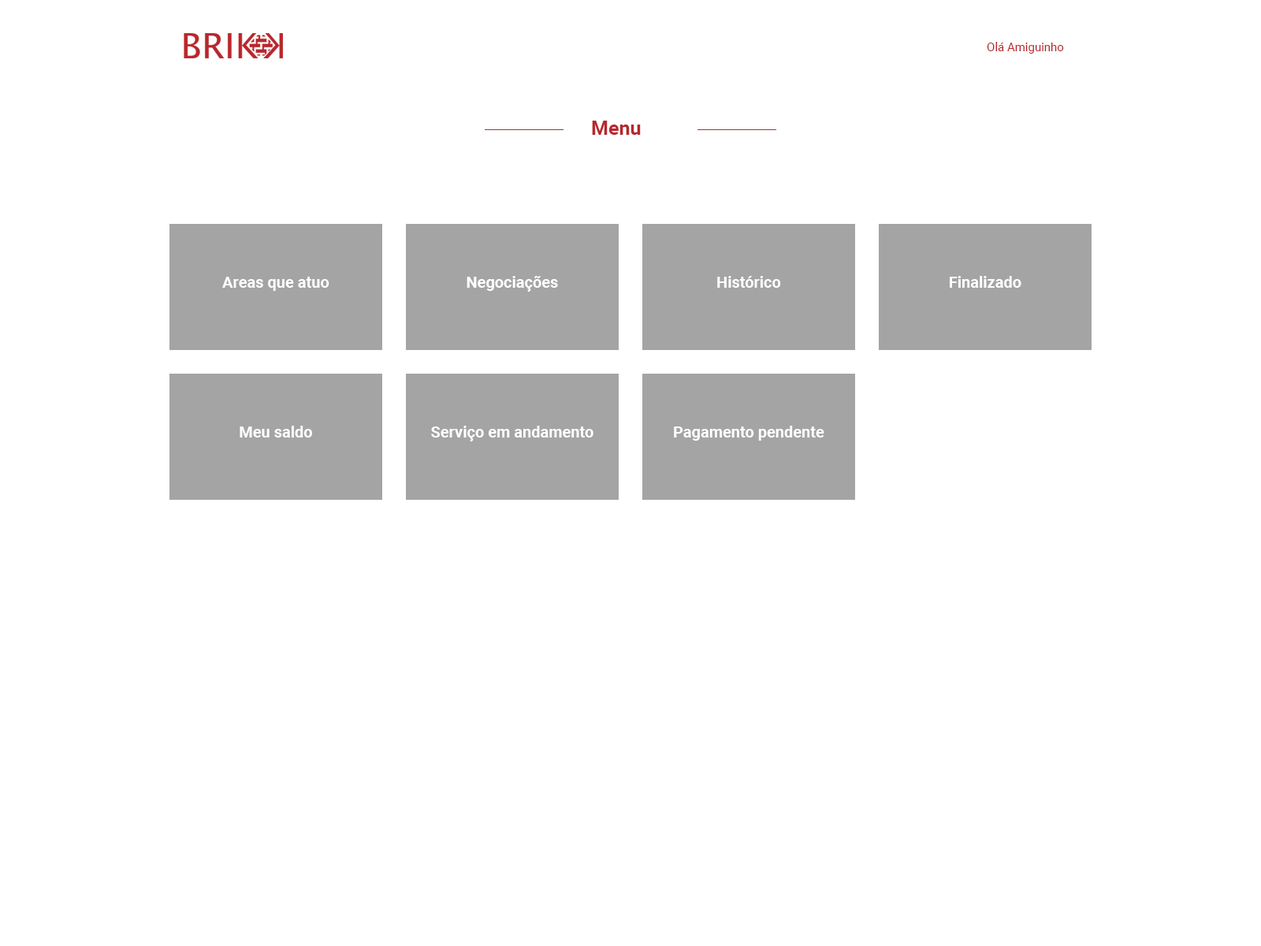
<style>
.page{position:relative;width:1261px;height:946px;background:#ffffff}
.page>*{position:absolute;margin:0}
.t1{font:11.8px "Roboto-Regular";color:#b8272c}
.t2{font:19.7px "Roboto-Bold";color:#b8272c}
.t3{font:15.8px "Roboto-Bold";color:#ffffff}
</style>
<div class="page">
<p class="t1" style="left:987px;top:42px;width:77px;height:12px">Olá Amiguinho</p>
<p class="t2" style="left:592px;top:121px;width:49px;height:14px">Menu</p>
<p class="t3" style="left:222px;top:277px;width:107px;height:14px">Areas que atuo</p>
<p class="t3" style="left:467px;top:276px;width:91px;height:16px">Negociações</p>
<p class="t3" style="left:717px;top:276px;width:64px;height:12px">Histórico</p>
<p class="t3" style="left:950px;top:276px;width:71px;height:12px">Finalizado</p>
<p class="t3" style="left:240px;top:426px;width:72px;height:11px">Meu saldo</p>
<p class="t3" style="left:431px;top:426px;width:162px;height:15px">Serviço em andamento</p>
<p class="t3" style="left:674px;top:426px;width:150px;height:15px">Pagamento pendente</p>
</div>
